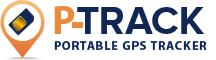
<style>
.page{position:relative;width:216px;height:60px;background:#ffffff}
.page>*{position:absolute;margin:0}
.t1{font:41px "MyriadPro-Bold";letter-spacing:0.075em;color:#e98b3a}
.t2{font:12.3px "MyriadPro-Bold";letter-spacing:0.075em;color:#112756}
</style>
<div class="page">
<p class="t1" style="left:54px;top:6px;width:21px;height:28px">P</p>
<p class="t2" style="left:54px;top:41px;width:153px;height:9px">PORTABLE GPS TRACKER</p>
</div>
